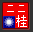
<style>
.page{position:relative;width:33px;height:32px;background:#f20000}
.page>*{position:absolute;margin:0}
.t1{font:10.4px "SimSun";color:#ffffff}
.t2{font:11.7px "SimSun";color:#ffffff}
</style>
<div class="page">
<p class="t1" style="left:7px;top:5px;width:18px;height:7px">二二</p>
<p class="t2" style="left:16px;top:15px;width:11px;height:12px">桂</p>
</div>
